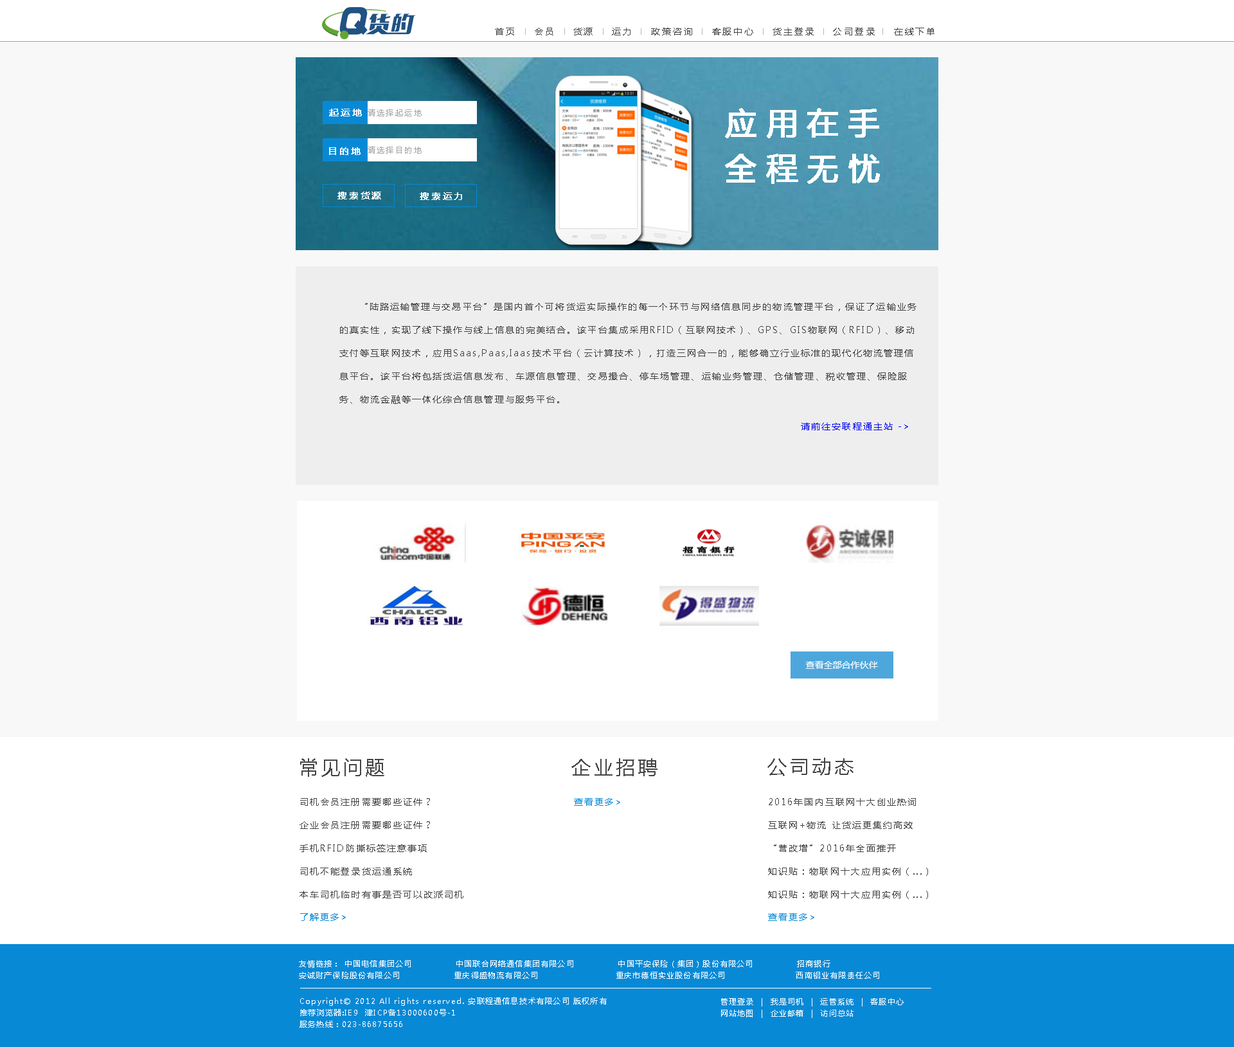
<style>
.page{position:relative;width:1234px;height:1047px;background:#f8f8f8}
.page>*{position:absolute;margin:0}
.t1{font:9px "MicrosoftYaHei";letter-spacing:0.2em;color:#444444}
.t2{font:9px "MicrosoftYaHei";letter-spacing:0.2em;color:#ffffff;font-weight:bold}
.t3{font:7.7px "MicrosoftYaHei";letter-spacing:0.2em;color:#a6a6a6}
.t4{font:30.9px/45px "MicrosoftYaHei";letter-spacing:0.3em;color:#ffffff;font-weight:bold}
.t5{font:9px/23.1px "MicrosoftYaHei";letter-spacing:0.15em;color:#444444}
.t6{font:9px "MicrosoftYaHei";letter-spacing:0.15em;color:#0000ee}
.t7{font:19.3px "MicrosoftYaHei";letter-spacing:0.15em;color:#444444}
.t8{font:9px "MicrosoftYaHei";letter-spacing:0.15em;color:#0889d6}
.t9{font:7.7px/11.6px "MicrosoftYaHei";letter-spacing:0.1em;color:#ffffff}
</style>
<div class="page">
<p class="t1" style="left:495px;top:28px;width:440px;height:7px">首页    会员    货源    运力    政策咨询    客服中心    货主登录    公司登录    在线下单</p>
<p class="t1" style="left:495px;top:28px;width:440px;height:7px">首页    会员    货源    运力    政策咨询    客服中心    货主登录    公司登录    在线下单</p>
<p class="t1" style="left:495px;top:28px;width:440px;height:7px">首页    会员    货源    运力    政策咨询    客服中心    货主登录    公司登录    在线下单</p>
<p class="t1" style="left:495px;top:28px;width:440px;height:7px">首页    会员    货源    运力    政策咨询    客服中心    货主登录    公司登录    在线下单</p>
<p class="t2" style="left:329px;top:109px;width:33px;height:7px">起运地</p>
<p class="t2" style="left:329px;top:109px;width:33px;height:7px">起运地</p>
<p class="t3" style="left:368px;top:109px;width:54px;height:7px">请选择起运地</p>
<p class="t3" style="left:368px;top:109px;width:54px;height:7px">请选择起运地</p>
<p class="t4" style="left:725px;top:108px;width:155px;height:76px">应用在手<br>全程无忧</p>
<p class="t4" style="left:725px;top:108px;width:155px;height:76px">应用在手<br>全程无忧</p>
<p class="t2" style="left:329px;top:147px;width:32px;height:8px">目的地</p>
<p class="t2" style="left:329px;top:147px;width:32px;height:8px">目的地</p>
<p class="t3" style="left:368px;top:146px;width:54px;height:8px">请选择目的地</p>
<p class="t3" style="left:368px;top:146px;width:54px;height:8px">请选择目的地</p>
<p class="t2" style="left:338px;top:192px;width:43px;height:7px">搜索货源</p>
<p class="t2" style="left:338px;top:192px;width:43px;height:7px">搜索货源</p>
<p class="t2" style="left:420px;top:192px;width:42px;height:8px">搜索运力</p>
<p class="t2" style="left:420px;top:192px;width:42px;height:8px">搜索运力</p>
<p class="t5" style="left:339px;top:303px;width:578px;height:101px">“陆路运输管理与交易平台”是国内首个可将货运实际操作的每一个环节与网络信息同步的物流管理平台，保证了运输业务<br>的真实性，实现了线下操作与线上信息的完美结合。该平台集成采用RFID（互联网技术）、GPS、GIS物联网（RFID）、移动<br>支付等互联网技术，应用Saas,Paas,Iaas技术平台（云计算技术），打造三网合一的，能够确立行业标准的现代化物流管理信<br>息平台。该平台将包括货运信息发布、车源信息管理、交易撮合、停车场管理、运输业务管理、仓储管理、税收管理、保险服<br>务、物流金融等一体化综合信息管理与服务平台。</p>
<p class="t6" style="left:801px;top:422px;width:107px;height:8px">请前往安联程通主站 -&gt;</p>
<p class="t7" style="left:300px;top:758px;width:84px;height:19px">常见问题</p>
<p class="t7" style="left:572px;top:758px;width:86px;height:18px">企业招聘</p>
<p class="t7" style="left:768px;top:757px;width:86px;height:19px">公司动态</p>
<p class="t5" style="left:300px;top:798px;width:164px;height:100px">司机会员注册需要哪些证件？<br>企业会员注册需要哪些证件？<br>手机RFID防撕标签注意事项<br>司机不能登录货运通系统<br>本车司机临时有事是否可以改派司机</p>
<p class="t8" style="left:574px;top:798px;width:46px;height:8px">查看更多&gt;</p>
<p class="t5" style="left:768px;top:798px;width:160px;height:101px">2016年国内互联网十大创业热词<br>互联网+物流 让货运更集约高效<br>“营改增”2016年全面推开<br>知识贴：物联网十大应用实例（...）<br>知识贴：物联网十大应用实例（...）</p>
<p class="t8" style="left:300px;top:913px;width:46px;height:8px">了解更多&gt;</p>
<p class="t8" style="left:768px;top:913px;width:47px;height:8px">查看更多&gt;</p>
<p class="t9" style="left:299px;top:960px;width:580px;height:18px">友情链接： 中国电信集团公司             中国联合网络通信集团有限公司             中国平安保险（集团）股份有限公司             招商银行          <br>安诚财产保险股份有限公司                重庆得盛物流有限公司                       重庆市德恒实业股份有限公司                     西南铝业有限责任公司</p>
<p class="t9" style="left:299px;top:960px;width:580px;height:18px">友情链接： 中国电信集团公司             中国联合网络通信集团有限公司             中国平安保险（集团）股份有限公司             招商银行          <br>安诚财产保险股份有限公司                重庆得盛物流有限公司                       重庆市德恒实业股份有限公司                     西南铝业有限责任公司</p>
<p class="t9" style="left:300px;top:996px;width:307px;height:31px">Copyright© 2012 All rights reserved. 安联程通信息技术有限公司 版权所有<br>推荐浏览器:IE9  津ICP备13000600号-1<br>服务热线：023-86875656</p>
<p class="t9" style="left:300px;top:996px;width:307px;height:31px">Copyright© 2012 All rights reserved. 安联程通信息技术有限公司 版权所有<br>推荐浏览器:IE9  津ICP备13000600号-1<br>服务热线：023-86875656</p>
<p class="t9" style="left:721px;top:998px;width:183px;height:20px">管理登录  |  我是司机  |  运管系统  |  客服中心<br>    网站地图  |  企业邮箱  |  访问总站</p>
<p class="t9" style="left:721px;top:998px;width:183px;height:20px">管理登录  |  我是司机  |  运管系统  |  客服中心<br>    网站地图  |  企业邮箱  |  访问总站</p>
</div>
